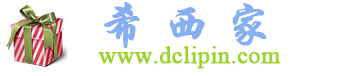
<style>
.page{position:relative;width:346px;height:76px;background:#ffffff}
.page>*{position:absolute;margin:0}
.t1{font:48px "STXingkai";color:#87aef1;font-weight:bold}
.t2{font:24px "IskoolaPota";color:#9ad32c;font-weight:bold}
</style>
<div class="page">
<p class="t1" style="left:104px;top:2px;width:163px;height:46px">希 西 家</p>
<p class="t2" style="left:98px;top:46px;width:183px;height:23px">www.dclipin.com</p>
</div>
